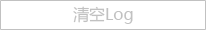
<style>
.page{position:relative;width:206px;height:30px;background:#ffffff}
.page>*{position:absolute;margin:0}
.t1{font:16px "MicrosoftYaHei";color:#c1c1c1}
</style>
<div class="page">
<p class="t1" style="left:73px;top:6px;width:60px;height:18px">清空Log</p>
</div>
